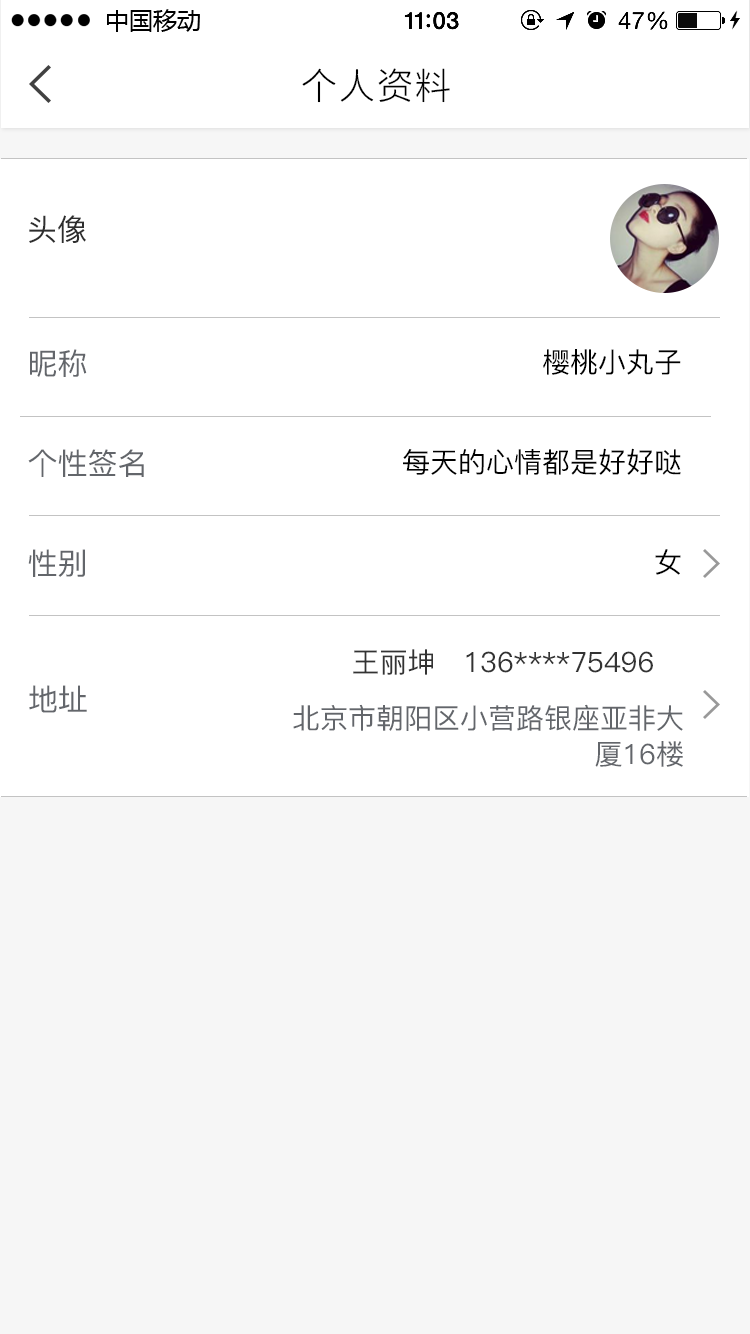
<style>
.page{position:relative;width:750px;height:1334px;background:#ffffff}
.page>*{position:absolute;margin:0}
.t1{font:35.7px "STHeitiSC-Light";color:#000000}
.t2{font:30px "PingFang-SC-Medium";color:#2e2e2e}
.t3{font:30px/100px "PingFang-SC-Medium";color:#63666b}
.t4{font:28px/100px "PingFang-SC-Medium";color:#000000}
.t5{font:28px "PingFang-SC-Medium";color:#333333}
.t6{font:30px "PingFang-SC-Medium";color:#63666b}
.t7{font:28px/36px "PingFang-SC-Medium";color:#63666b}
</style>
<div class="page">
<p class="t1" style="left:302px;top:68px;width:148px;height:35px">个人资料</p>
<p class="t2" style="left:29px;top:215px;width:57px;height:28px">头像</p>
<p class="t3" style="left:28px;top:349px;width:116px;height:228px">昵称<br>个性签名<br>性别</p>
<p class="t4" style="left:403px;top:349px;width:278px;height:226px;text-align:right">樱桃小丸子<br>每天的心情都是好好哒<br>女</p>
<p class="t5" style="left:353px;top:649px;width:300px;height:26px">王丽坤   136****75496</p>
<p class="t6" style="left:29px;top:685px;width:58px;height:28px">地址</p>
<p class="t7" style="left:293px;top:704px;width:390px;height:63px;text-align:right">北京市朝阳区小营路银座亚非大<br>厦16楼</p>
</div>
